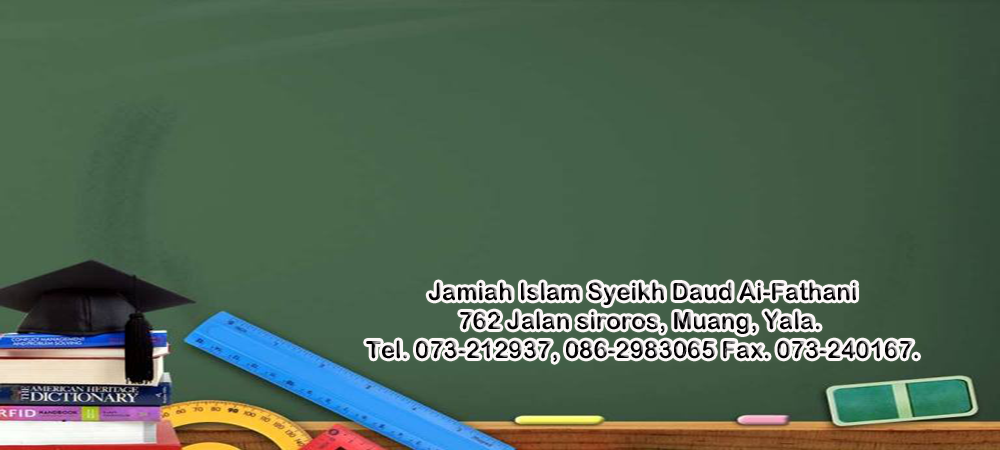
<style>
.page{position:relative;width:1000px;height:450px}
.page>*{position:absolute;margin:0}
.t1{font:24px "ArialRoundedMTBold";color:#080308}
</style>
<div class="page">
<p class="t1" style="left:366px;top:282px;width:552px;height:80px;text-align:center">Jamiah Islam Syeikh Daud Ai-Fathani<br>762 Jalan siroros, Muang, Yala. <br>Tel. 073-212937, 086-2983065 Fax. 073-240167.</p>
</div>
